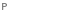
<style>
.page{position:relative;width:64px;height:13px;background:#ffffff}
.page>*{position:absolute;margin:0}
.t1{font:10.4px "MyriadPro-Regular";color:#808080}
</style>
<div class="page">
<p class="t1" style="left:2px;top:3px;width:5px;height:7px">P</p>
</div>
